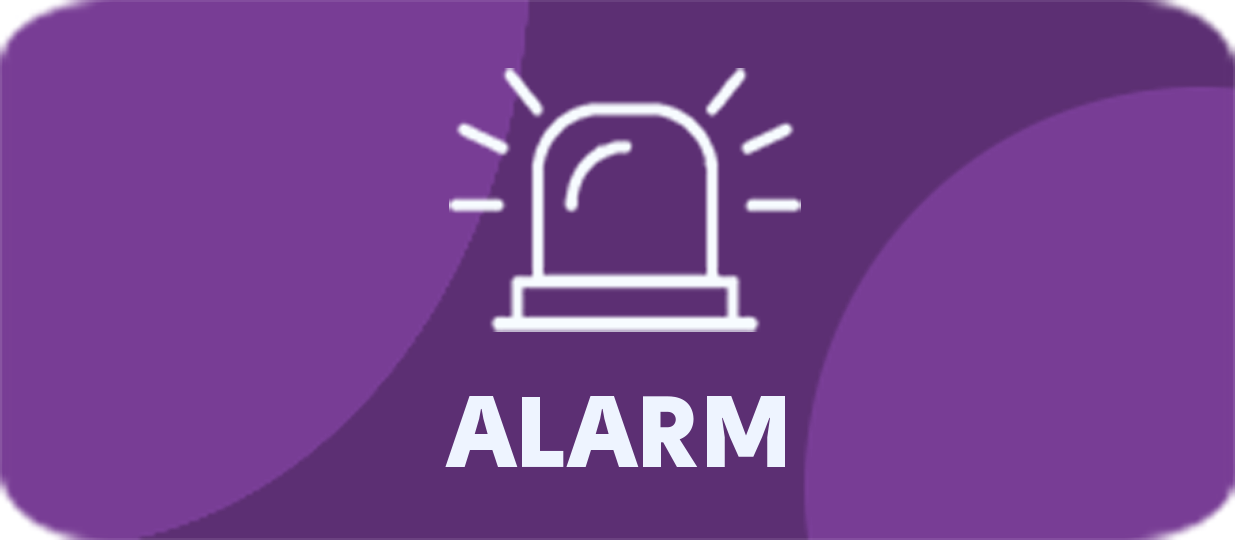
<style>
.page{position:relative;width:1235px;height:540px;background:#783d95}
.page>*{position:absolute;margin:0}
.t1{font:100.7px "Solomon-Sans-Black";color:#eef4ff}
</style>
<div class="page">
<p class="t1" style="left:445px;top:396px;width:340px;height:71px">ALARM</p>
</div>
